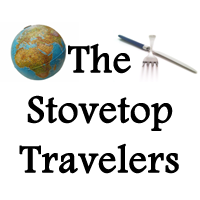
<style>
.page{position:relative;width:200px;height:200px;background:#ffffff}
.page>*{position:absolute;margin:0}
.t1{font:40px/50px "FootlightMTLight";color:#000000;font-weight:bold}
</style>
<div class="page">
<p class="t1" style="left:19px;top:43px;width:160px;height:131px;text-align:center">The<br>Stovetop<br>Travelers</p>
</div>
